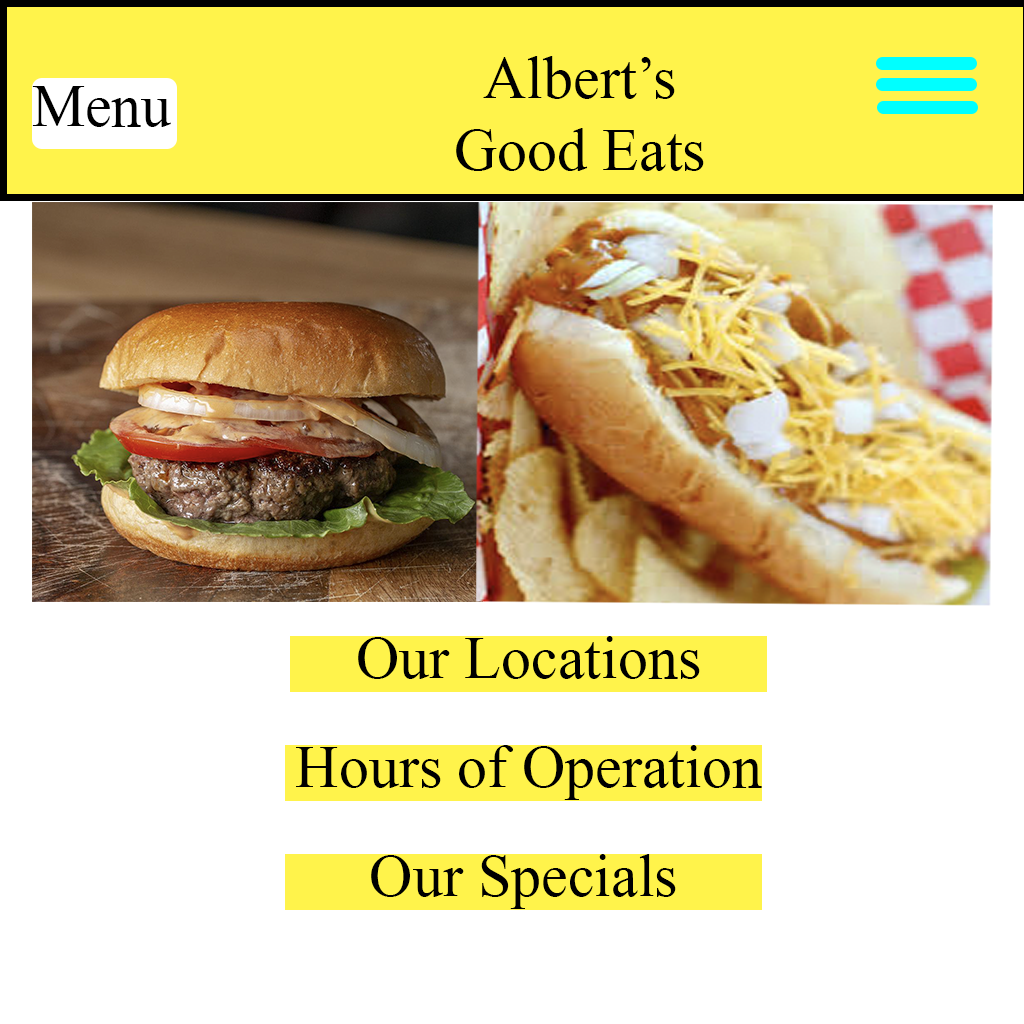
<style>
.page{position:relative;width:1024px;height:1024px;background:#ffffff}
.page>*{position:absolute;margin:0}
.t1{font:60px "MongolianBaiti";color:#000000}
</style>
<div class="page">
<p class="t1" style="left:456px;top:56px;width:248px;height:115px;text-align:center">Albert’s Good Eats</p>
<p class="t1" style="left:32px;top:86px;width:139px;height:41px">Menu</p>
<p class="t1" style="left:358px;top:636px;width:342px;height:43px">Our Locations</p>
<p class="t1" style="left:296px;top:745px;width:466px;height:55px">Hours of Operation</p>
<p class="t1" style="left:371px;top:854px;width:305px;height:55px">Our Specials</p>
</div>
